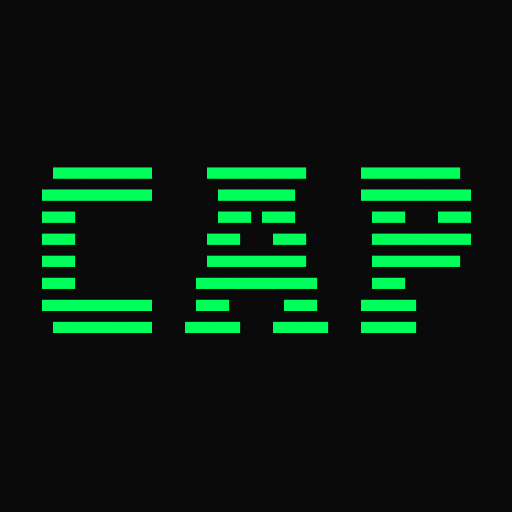
<style>
.page{position:relative;width:512px;height:512px;background:#0a0a0a}
.page>*{position:absolute;margin:0}
.t1{font:176.4px "IBM-Logo";color:#00ff5a}
</style>
<div class="page">
<p class="t1" style="left:42px;top:167px;width:429px;height:166px">CAP</p>
</div>
